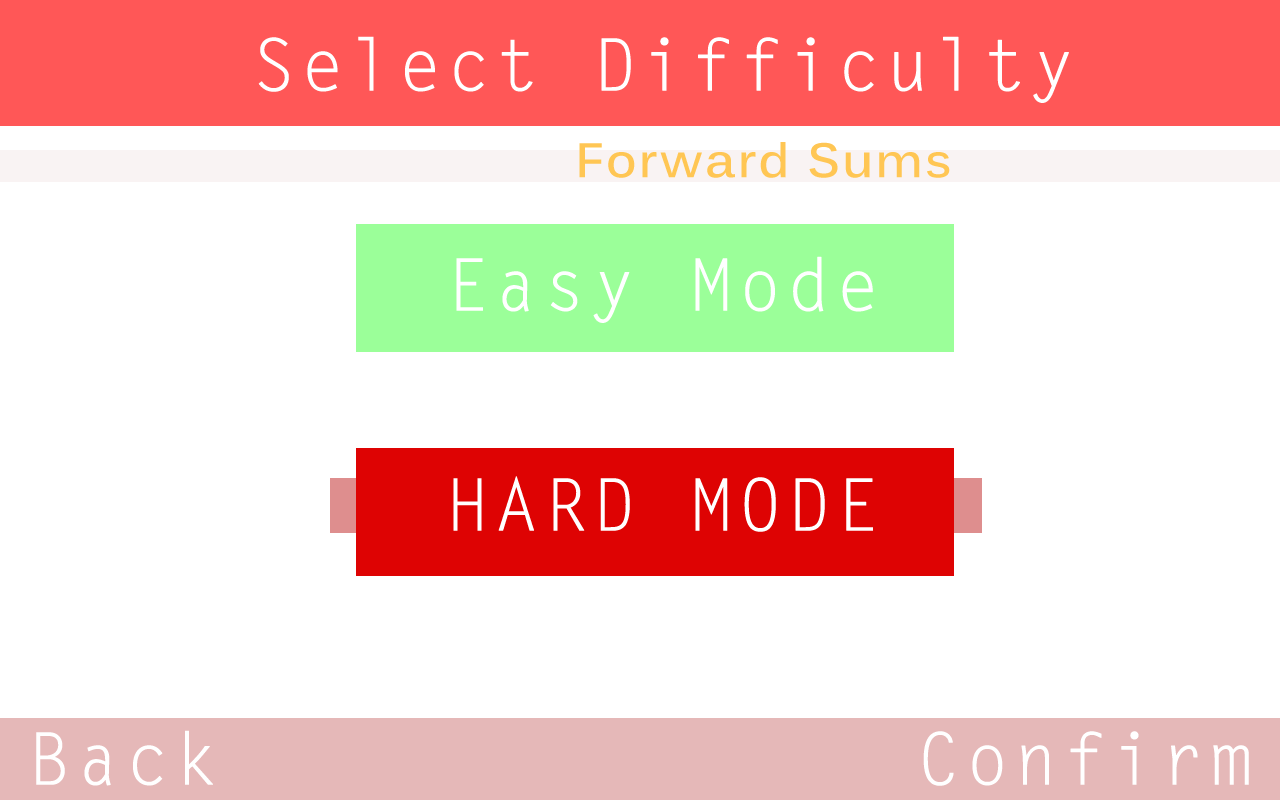
<style>
.page{position:relative;width:1280px;height:800px;background:#ffffff}
.page>*{position:absolute;margin:0}
.t1{font:72px "LetterGothicStd";letter-spacing:0.05em;color:#ffffff;font-weight:bold}
.t2{font:48px "Kalinga-Bold";letter-spacing:0.05em;color:#ffc654}
</style>
<div class="page">
<p class="t1" style="left:258px;top:36px;width:811px;height:67px">Select Difficulty</p>
<p class="t2" style="left:579px;top:142px;width:371px;height:36px">Forward Sums</p>
<p class="t1" style="left:456px;top:256px;width:417px;height:67px">Easy Mode</p>
<p class="t1" style="left:453px;top:476px;width:420px;height:56px">HARD MODE</p>
<p class="t1" style="left:36px;top:730px;width:177px;height:56px">Back</p>
<p class="t1" style="left:923px;top:731px;width:326px;height:55px">Confirm</p>
</div>
